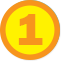
<style>
.page{position:relative;width:61px;height:61px;background:#fff200}
.page>*{position:absolute;margin:0}
.t1{font:45.8px "FranklinGothic-Heavy";color:#f7941d}
</style>
<div class="page">
<p class="t1" style="left:18px;top:14px;width:25px;height:31px">1</p>
</div>
